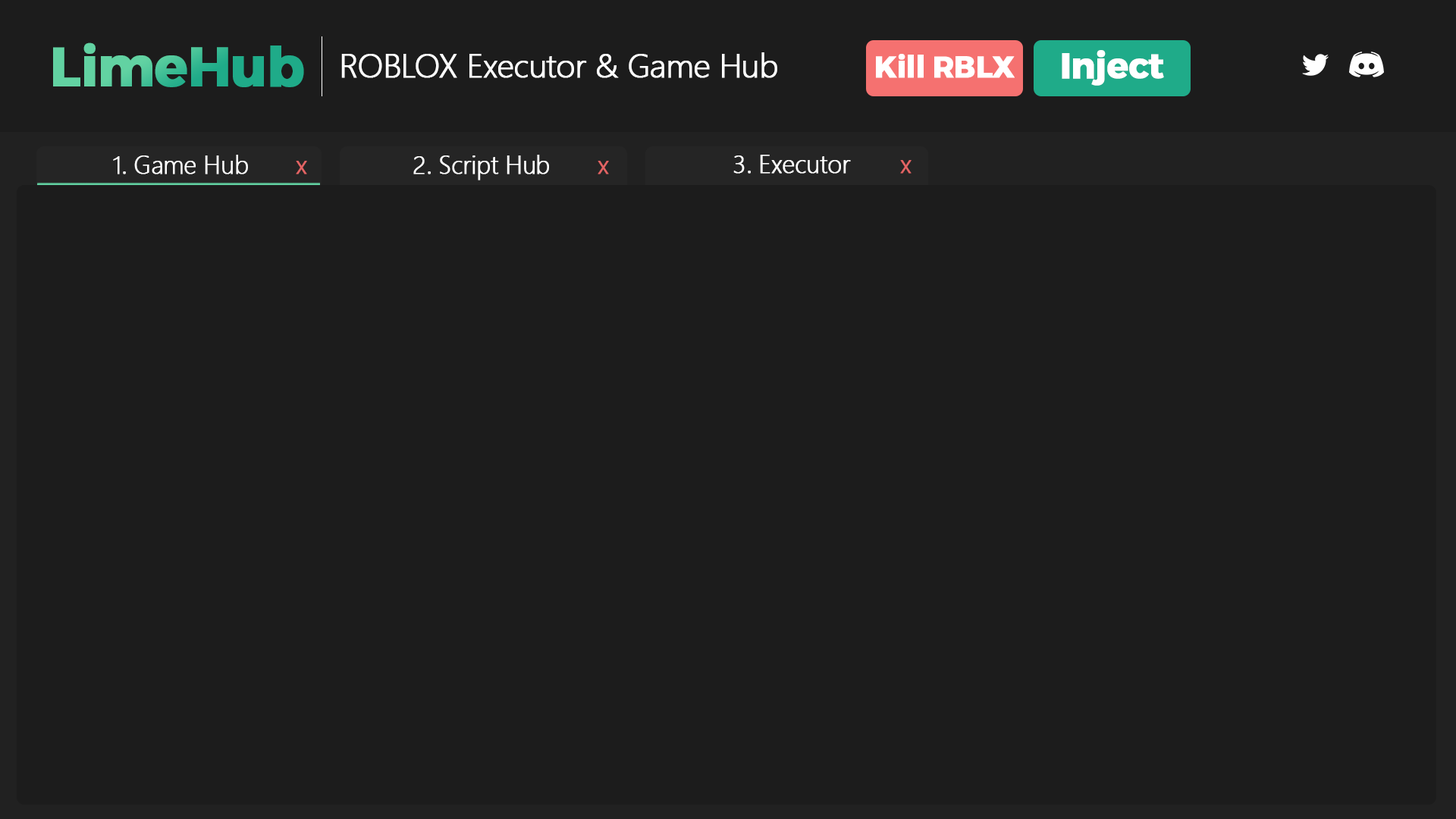
<style>
.page{position:relative;width:1456px;height:819px;background:#1c1c1c}
.page>*{position:absolute;margin:0}
.t1{font:54.6px "TruenoBd";letter-spacing:-0.025em;font-weight:bold}
.t2{font:33.1px "SegoeUI-Light";letter-spacing:-0.025em;color:#ffffff;font-weight:bold}
.t3{font:30px "TruenoBd";letter-spacing:-0.025em;color:#ffffff;font-weight:bold}
.t4{font:35.8px "TruenoBd";letter-spacing:-0.025em;color:#ffffff;font-weight:bold}
.t5{font:25.2px "SegoeUI-Light";letter-spacing:-0.025em;color:#ffffff;font-weight:bold}
.t6{font:25.5px "SegoeUI-Light";letter-spacing:-0.025em;color:#e36464;font-weight:bold}
.t7{font:25.3px "SegoeUI-Light";letter-spacing:-0.025em;color:#ffffff;font-weight:bold}
.t8{font:25.7px "SegoeUI-Light";letter-spacing:-0.025em;color:#e36464;font-weight:bold}
</style>
<div class="page">
<p class="t1" style="left:53px;top:42px;width:251px;height:45px">LimeHub</p>
<p class="t2" style="left:341px;top:52px;width:436px;height:26px">ROBLOX Executor &amp; Game Hub</p>
<p class="t3" style="left:876px;top:54px;width:139px;height:24px">Kill RBLX</p>
<p class="t4" style="left:1062px;top:50px;width:102px;height:36px">Inject</p>
<p class="t5" style="left:113px;top:155px;width:135px;height:19px">1. Game Hub</p>
<p class="t6" style="left:296px;top:161px;width:11px;height:13px">x</p>
<p class="t7" style="left:413px;top:155px;width:136px;height:25px">2. Script Hub</p>
<p class="t8" style="left:598px;top:161px;width:11px;height:13px">x</p>
<p class="t7" style="left:733px;top:155px;width:118px;height:19px">3. Executor</p>
<p class="t8" style="left:900px;top:160px;width:12px;height:14px">x</p>
</div>
